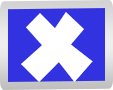
<style>
.page{position:relative;width:113px;height:90px;background:#3232e0}
.page>*{position:absolute;margin:0}
.t1{font:94.7px "SuperMarioGalaxy";color:#ffffff}
</style>
<div class="page">
<p class="t1" style="left:21px;top:12px;width:72px;height:70px">x</p>
</div>
